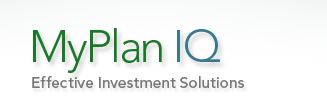
<style>
.page{position:relative;width:327px;height:106px;background:#ffffff}
.page>*{position:absolute;margin:0}
.t1{font:45px "Avenir-Light";letter-spacing:-0.04em;color:#1a7829}
.t2{font:45px "Avenir-Light";letter-spacing:-0.04em;color:#3b788f}
.t3{font:15.2px "Avenir-Medium";color:#787878}
</style>
<div class="page">
<p class="t1" style="left:33px;top:28px;width:187px;height:45px">MyPlan <span class="t2">IQ</span></p>
<p class="t3" style="left:32px;top:76px;width:212px;height:12px">Effective Investment Solutions</p>
</div>
